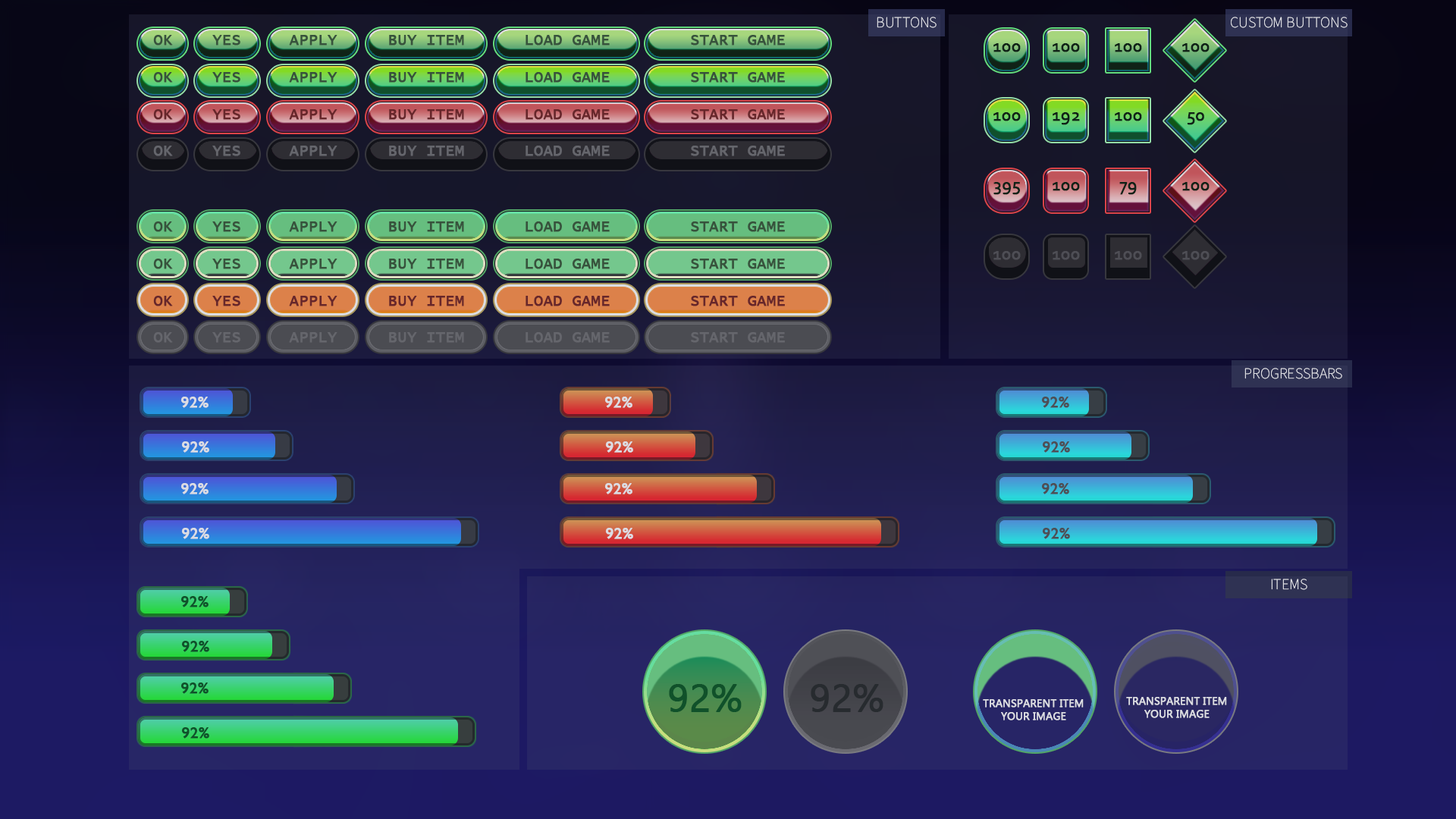
<style>
.page{position:relative;width:1456px;height:819px}
.page>*{position:absolute;margin:0}
.t1{font:15.2px "SourceSansVariable-Roman";color:#dcdde3;text-transform:uppercase;font-weight:bold}
.t2{font:15.2px "LucidaConsole";color:#30512e;text-transform:uppercase;font-weight:bold}
.t3{font:18.2px "Corbel";color:#001500;text-transform:uppercase;font-weight:bold}
.t4{font:15.2px "LucidaConsole";color:#6d1a18;text-transform:uppercase;font-weight:bold}
.t5{font:15.2px "LucidaConsole";color:#6a6a6a;text-transform:uppercase;font-weight:bold}
.t6{font:18.2px "Corbel";color:#4d4d4d;text-transform:uppercase;font-weight:bold}
.t7{font:15.9px "GillSansNova";color:#dcdde3;text-transform:uppercase;font-weight:bold}
.t8{font:15.9px "GillSansNova";color:#4d4d4d;text-transform:uppercase;font-weight:bold}
.t9{font:15.9px "GillSansNova";color:#005017;text-transform:uppercase;font-weight:bold}
.t10{font:37.9px "Gadugi";color:#005017;text-transform:uppercase;font-weight:bold}
.t11{font:37.9px "Gadugi";color:#1d211e;text-transform:uppercase;font-weight:bold}
.t12{font:10.6px "Gadugi";color:#dcdde3;text-transform:uppercase;font-weight:bold}
</style>
<div class="page">
<p class="t1" style="left:877px;top:17px;width:60px;height:11px">buttons</p>
<p class="t1" style="left:1231px;top:17px;width:117px;height:11px">custom buttons</p>
<p class="t2" style="left:153px;top:35px;width:20px;height:10px">Ok</p>
<p class="t2" style="left:212px;top:35px;width:28px;height:10px">Yes</p>
<p class="t2" style="left:289px;top:35px;width:48px;height:10px">apply</p>
<p class="t2" style="left:389px;top:35px;width:75px;height:10px">buy item</p>
<p class="t2" style="left:526px;top:35px;width:84px;height:10px">load game</p>
<p class="t2" style="left:691px;top:35px;width:94px;height:10px">Start game</p>
<p class="t3" style="left:993px;top:43px;width:28px;height:9px">100</p>
<p class="t3" style="left:1053px;top:43px;width:27px;height:9px">100</p>
<p class="t3" style="left:1115px;top:43px;width:27px;height:9px">100</p>
<p class="t3" style="left:1182px;top:43px;width:28px;height:9px">100</p>
<p class="t2" style="left:153px;top:72px;width:20px;height:11px">Ok</p>
<p class="t2" style="left:212px;top:72px;width:28px;height:11px">Yes</p>
<p class="t2" style="left:289px;top:72px;width:48px;height:11px">apply</p>
<p class="t2" style="left:389px;top:72px;width:75px;height:11px">buy item</p>
<p class="t2" style="left:526px;top:72px;width:84px;height:11px">load game</p>
<p class="t2" style="left:691px;top:72px;width:94px;height:11px">Start game</p>
<p class="t4" style="left:153px;top:109px;width:20px;height:11px">Ok</p>
<p class="t4" style="left:212px;top:109px;width:28px;height:11px">Yes</p>
<p class="t4" style="left:289px;top:109px;width:48px;height:11px">apply</p>
<p class="t4" style="left:389px;top:109px;width:75px;height:11px">buy item</p>
<p class="t4" style="left:526px;top:109px;width:84px;height:11px">load game</p>
<p class="t4" style="left:691px;top:109px;width:94px;height:11px">Start game</p>
<p class="t3" style="left:993px;top:112px;width:28px;height:9px">100</p>
<p class="t3" style="left:1053px;top:112px;width:27px;height:13px">192</p>
<p class="t3" style="left:1115px;top:112px;width:27px;height:9px">100</p>
<p class="t3" style="left:1187px;top:112px;width:17px;height:13px">50</p>
<p class="t5" style="left:153px;top:146px;width:20px;height:10px">Ok</p>
<p class="t5" style="left:212px;top:146px;width:28px;height:10px">Yes</p>
<p class="t5" style="left:289px;top:146px;width:48px;height:10px">apply</p>
<p class="t5" style="left:389px;top:146px;width:75px;height:10px">buy item</p>
<p class="t5" style="left:526px;top:146px;width:84px;height:10px">load game</p>
<p class="t5" style="left:691px;top:146px;width:94px;height:10px">Start game</p>
<p class="t3" style="left:993px;top:182px;width:27px;height:13px">395</p>
<p class="t3" style="left:1053px;top:182px;width:27px;height:9px">100</p>
<p class="t3" style="left:1119px;top:182px;width:18px;height:13px">79</p>
<p class="t3" style="left:1182px;top:182px;width:28px;height:9px">100</p>
<p class="t2" style="left:153px;top:221px;width:20px;height:11px">Ok</p>
<p class="t2" style="left:212px;top:221px;width:28px;height:11px">Yes</p>
<p class="t2" style="left:289px;top:221px;width:48px;height:11px">apply</p>
<p class="t2" style="left:389px;top:221px;width:75px;height:11px">buy item</p>
<p class="t2" style="left:526px;top:221px;width:84px;height:11px">load game</p>
<p class="t2" style="left:691px;top:221px;width:94px;height:11px">Start game</p>
<p class="t6" style="left:993px;top:251px;width:28px;height:9px">100</p>
<p class="t6" style="left:1053px;top:251px;width:27px;height:9px">100</p>
<p class="t6" style="left:1115px;top:251px;width:27px;height:9px">100</p>
<p class="t6" style="left:1182px;top:251px;width:28px;height:9px">100</p>
<p class="t2" style="left:153px;top:259px;width:20px;height:10px">Ok</p>
<p class="t2" style="left:212px;top:259px;width:28px;height:10px">Yes</p>
<p class="t2" style="left:289px;top:259px;width:48px;height:10px">apply</p>
<p class="t2" style="left:389px;top:259px;width:75px;height:10px">buy item</p>
<p class="t2" style="left:526px;top:259px;width:84px;height:10px">load game</p>
<p class="t2" style="left:691px;top:259px;width:94px;height:10px">Start game</p>
<p class="t4" style="left:153px;top:296px;width:20px;height:10px">Ok</p>
<p class="t4" style="left:212px;top:296px;width:28px;height:10px">Yes</p>
<p class="t4" style="left:289px;top:296px;width:48px;height:10px">apply</p>
<p class="t4" style="left:389px;top:296px;width:75px;height:10px">buy item</p>
<p class="t4" style="left:526px;top:296px;width:84px;height:10px">load game</p>
<p class="t4" style="left:691px;top:296px;width:94px;height:10px">Start game</p>
<p class="t5" style="left:153px;top:332px;width:20px;height:11px">Ok</p>
<p class="t5" style="left:212px;top:332px;width:28px;height:11px">Yes</p>
<p class="t5" style="left:289px;top:332px;width:48px;height:11px">apply</p>
<p class="t5" style="left:389px;top:332px;width:75px;height:11px">buy item</p>
<p class="t5" style="left:526px;top:332px;width:84px;height:11px">load game</p>
<p class="t5" style="left:691px;top:332px;width:94px;height:11px">Start game</p>
<p class="t1" style="left:1244px;top:368px;width:98px;height:11px">ProgressBars</p>
<p class="t7" style="left:180px;top:397px;width:29px;height:11px">92%</p>
<p class="t7" style="left:604px;top:397px;width:28px;height:11px">92%</p>
<p class="t8" style="left:1041px;top:397px;width:28px;height:11px">92%</p>
<p class="t7" style="left:181px;top:441px;width:28px;height:12px">92%</p>
<p class="t7" style="left:605px;top:441px;width:28px;height:12px">92%</p>
<p class="t8" style="left:1042px;top:441px;width:28px;height:12px">92%</p>
<p class="t7" style="left:180px;top:483px;width:29px;height:11px">92%</p>
<p class="t7" style="left:604px;top:483px;width:28px;height:11px">92%</p>
<p class="t8" style="left:1041px;top:483px;width:28px;height:11px">92%</p>
<p class="t7" style="left:181px;top:528px;width:28px;height:11px">92%</p>
<p class="t7" style="left:605px;top:528px;width:28px;height:11px">92%</p>
<p class="t8" style="left:1042px;top:528px;width:28px;height:11px">92%</p>
<p class="t1" style="left:1271px;top:579px;width:36px;height:11px">items</p>
<p class="t9" style="left:180px;top:596px;width:29px;height:11px">92%</p>
<p class="t9" style="left:181px;top:641px;width:28px;height:11px">92%</p>
<p class="t9" style="left:180px;top:682px;width:29px;height:12px">92%</p>
<p class="t10" style="left:669px;top:684px;width:73px;height:28px">92%</p>
<p class="t11" style="left:811px;top:684px;width:72px;height:28px">92%</p>
<p class="t12" style="left:983px;top:699px;width:101px;height:21px;text-align:center">Transparent Item<br>your image</p>
<p class="t12" style="left:1126px;top:697px;width:101px;height:21px;text-align:center">Transparent Item<br>your image</p>
<p class="t9" style="left:181px;top:727px;width:28px;height:12px">92%</p>
</div>
